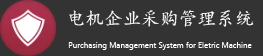
<style>
.page{position:relative;width:263px;height:56px;background:#333333}
.page>*{position:absolute;margin:0}
.t1{font:8px "Ebrima";color:#ffffff}
.t2{font:18.7px "¿¬Ìå";color:#ffffff}
</style>
<div class="page">
<p class="t1" style="left:68px;top:10px;width:186px;height:40px;text-align:center"><span class="t2">电机企业采购管理系统<br></span>Purchasing Management System for Eletric Machine</p>
</div>
